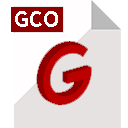
<style>
.page{position:relative;width:128px;height:128px;background:#e6e2e1}
.page>*{position:absolute;margin:0}
.t1{font:21px "TaipeiSansTCBeta-Bold";color:#ffffff}
</style>
<div class="page">
<p class="t1" style="left:15px;top:11px;width:43px;height:16px">GCO</p>
</div>
